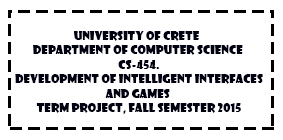
<style>
.page{position:relative;width:283px;height:140px;background:#ffffff}
.page>*{position:absolute;margin:0}
.t1{font:12px "ShowcardGothic-Reg";color:#000110}
</style>
<div class="page">
<p class="t1" style="left:15px;top:31px;width:248px;height:83px;text-align:center">University of Crete  <br>Department of Computer Science <br> CS-454. <br>Development of Intelligent Interfaces<br>and Games <br>Term Project, Fall Semester 2015</p>
</div>
